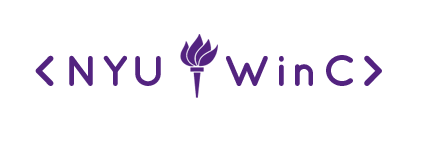
<style>
.page{position:relative;width:423px;height:142px;background:#ffffff}
.page>*{position:absolute;margin:0}
.t1{font:43.5px "Quicksand-Bold";letter-spacing:0.1em;color:#532380}
</style>
<div class="page">
<p class="t1" style="left:35px;top:55px;width:347px;height:31px">&lt;NYU   WinC&gt;</p>
</div>
